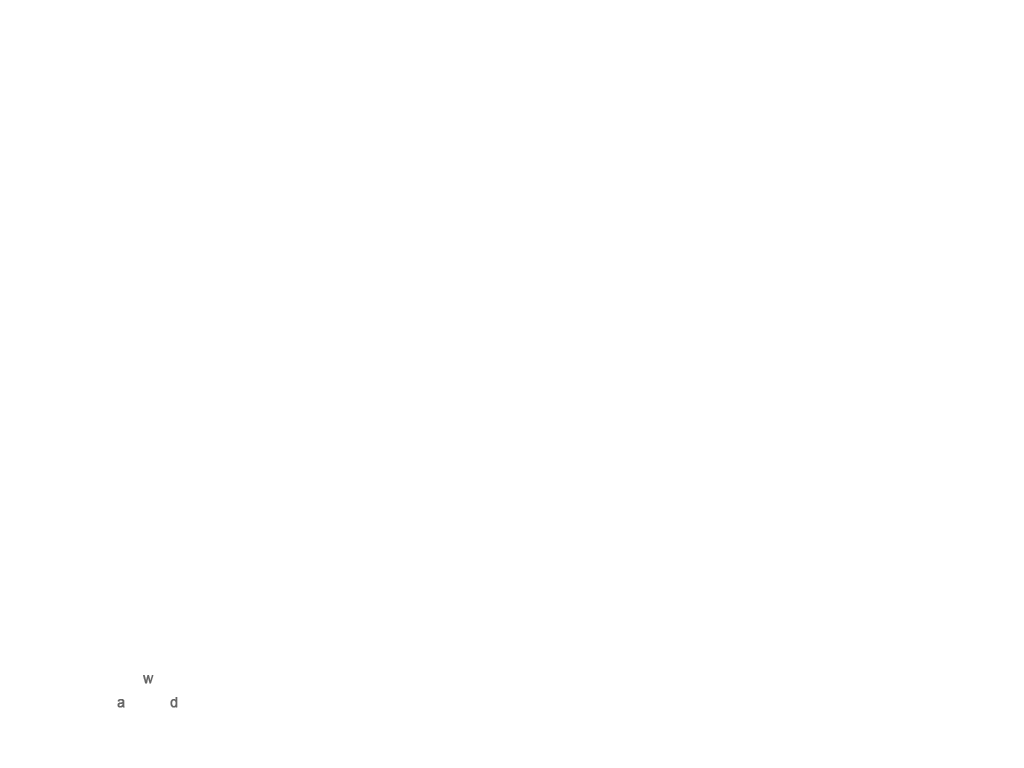
<style>
.page{position:relative;width:1024px;height:768px;background:#ffffff}
.page>*{position:absolute;margin:0}
.t1{font:14px "ArialMT";color:#666666;font-weight:bold}
</style>
<div class="page">
<p class="t1" style="left:143px;top:675px;width:11px;height:9px">w</p>
<p class="t1" style="left:117px;top:699px;width:8px;height:9px">a</p>
<p class="t1" style="left:170px;top:697px;width:8px;height:11px">d</p>
</div>
